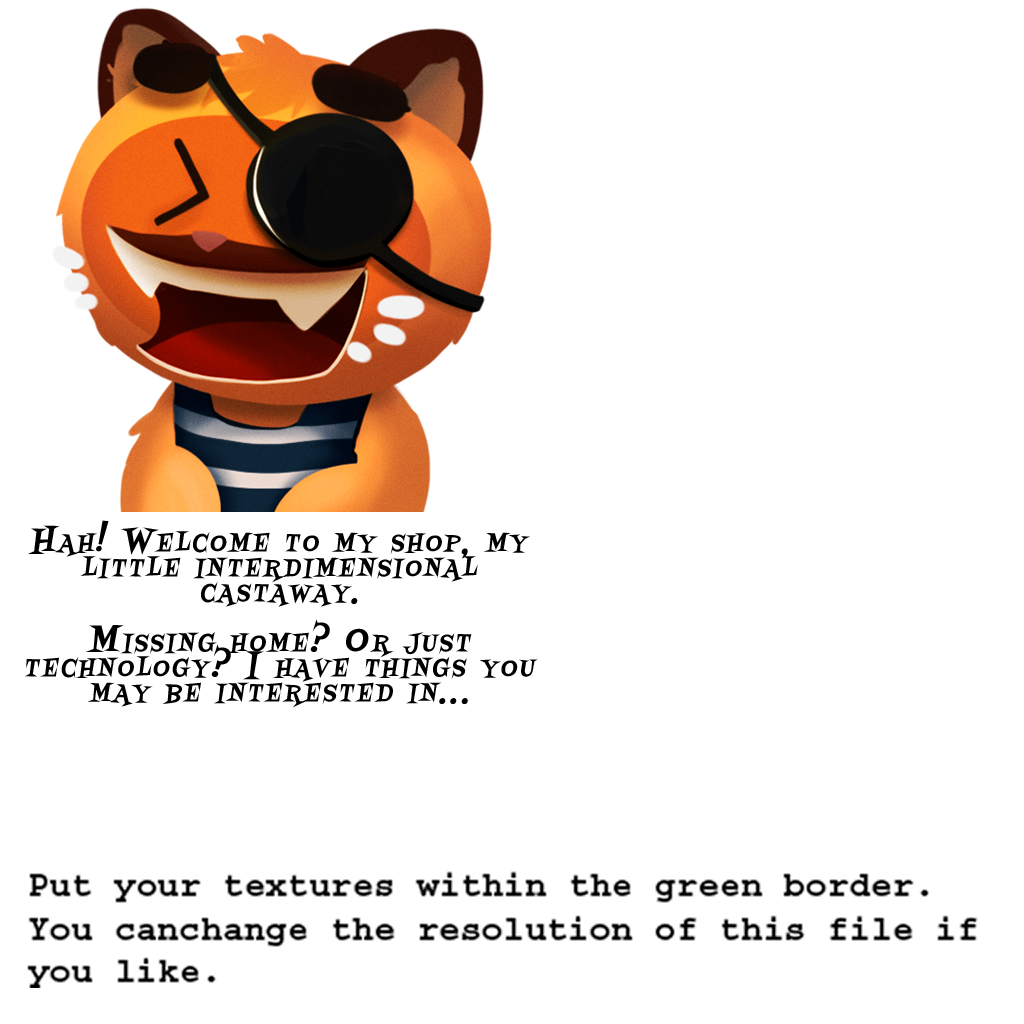
<style>
.page{position:relative;width:1024px;height:1024px;background:#ffffff}
.page>*{position:absolute;margin:0}
.t1{font:36px/25px "FontdinerSwanky";letter-spacing:0.14em;color:#000000;font-variant:small-caps;font-style:italic;scale:0.8 1}
</style>
<div class="page">
<p class="t1" style="left:25px;top:520px;width:513px;height:188px;text-align:center">Hah! Welcome to my shop, my little interdimensional castaway.<br><br>Missing home? Or just technology? I have things you may be interested in...</p>
</div>
